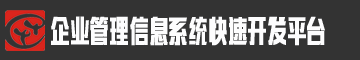
<style>
.page{position:relative;width:360px;height:60px;background:#333333}
.page>*{position:absolute;margin:0}
.t1{font:37.5px "MFBanHei_Noncommercial-Regular";letter-spacing:0.1em;color:#fdfdfe;font-weight:bold;scale:0.47 1}
</style>
<div class="page">
<p class="t1" style="left:51px;top:16px;width:274px;height:30px">企业管理信息系统快速开发平台</p>
</div>
